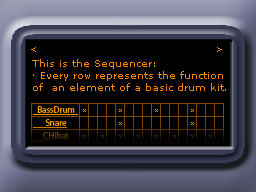
<style>
.page{position:relative;width:256px;height:192px;background:#000000}
.page>*{position:absolute;margin:0}
.t1{font:9px "MSReferenceSansSerif";color:#ff8400}
.t2{font:10px "MSReferenceSansSerif";color:#ff8400}
</style>
<div class="page">
<p class="t1" style="left:31px;top:47px;width:5px;height:5px">&lt;</p>
<p class="t1" style="left:217px;top:47px;width:5px;height:5px">&gt;</p>
<p class="t2" style="left:32px;top:59px;width:194px;height:32px">This is the Sequencer:<br>· Every row represents the function <br>of  an element of a basic drum kit.</p>
</div>
